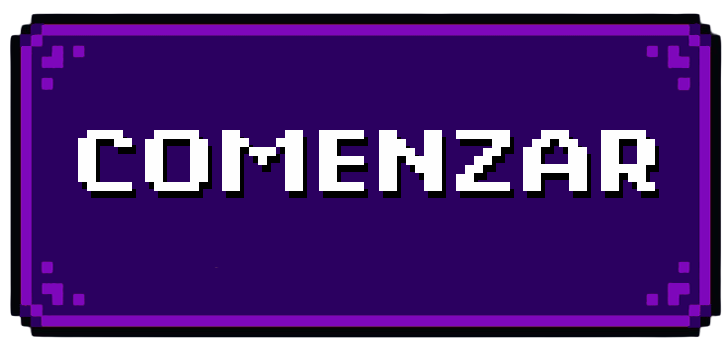
<style>
.page{position:relative;width:722px;height:346px;background:#2b0060}
.page>*{position:absolute;margin:0}
.t1{font:80.4px "BerkeliumBitmap";color:#fefefe}
</style>
<div class="page">
<p class="t1" style="left:78px;top:130px;width:577px;height:61px">COMENZAR</p>
</div>
